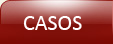
<style>
.page{position:relative;width:113px;height:44px}
.page>*{position:absolute;margin:0}
.t1{font:22px "Calibri";color:#ffffff}
</style>
<div class="page">
<p class="t1" style="left:23px;top:16px;width:59px;height:14px">CASOS</p>
</div>
